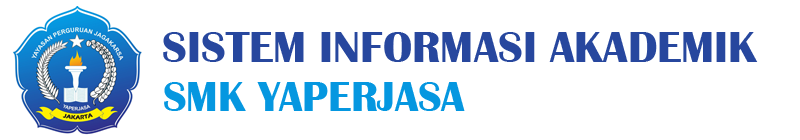
<style>
.page{position:relative;width:800px;height:140px;background:#ffffff}
.page>*{position:absolute;margin:0}
.t1{font:45px "BritannicBold";color:#27479e}
.t2{font:42.6px "BritannicBold";color:#0597e0}
</style>
<div class="page">
<p class="t1" style="left:163px;top:32px;width:595px;height:30px">SISTEM INFORMASI AKADEMIK</p>
<p class="t2" style="left:164px;top:82px;width:301px;height:29px">SMK YAPERJASA</p>
</div>
